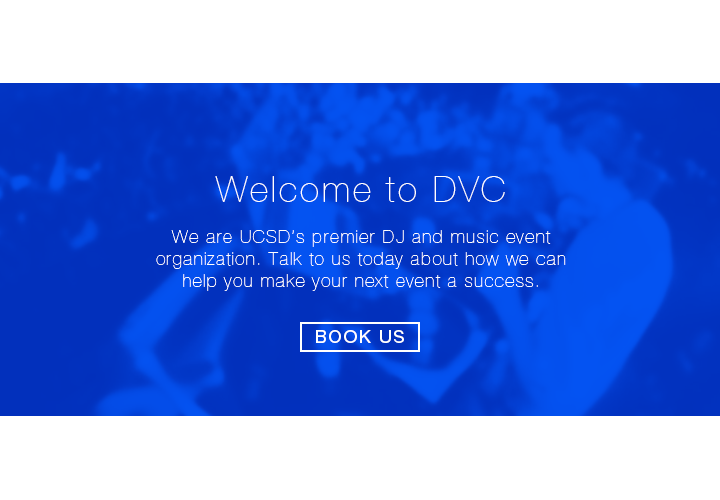
<style>
.page{position:relative;width:720px;height:500px;background:#ffffff}
.page>*{position:absolute;margin:0}
.t1{font:18px/22px "HelveticaNeueLTPro-UltLt";letter-spacing:0.08em;color:#ffffff}
.t2{font:36px "HelveticaNeueLTPro-UltLt";letter-spacing:0.08em;color:#ffffff}
.t3{font:18px/41px "HelveticaNeueLTPro-UltLt";letter-spacing:0.08em;color:#ffffff}
.t4{font:18px "HelveticaNeueLTPro-Roman";letter-spacing:0.08em;color:#ffffff}
</style>
<div class="page">
<p class="t1" style="left:156px;top:176px;width:410px;height:115px;text-align:center"><span class="t2">Welcome to DVC<br></span><span class="t3">We are UCSD’s premier DJ and music event<br></span>organization. Talk to us today about how we can<br>help you make your next event a success.</p>
<p class="t4" style="left:316px;top:330px;width:88px;height:13px">BOOK US</p>
</div>
